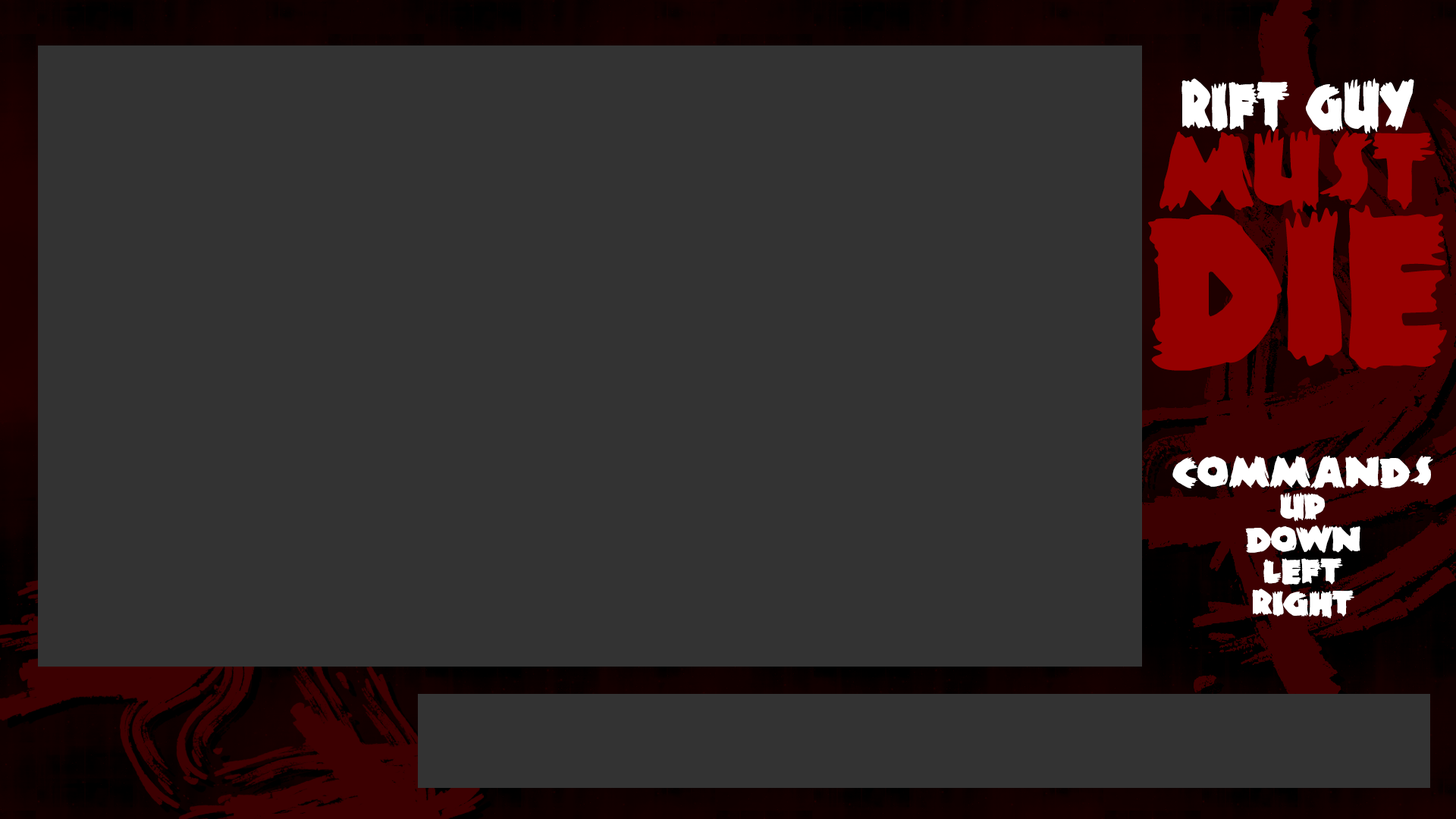
<style>
.page{position:relative;width:1456px;height:819px;background:#333333}
.page>*{position:absolute;margin:0}
.t1{font:77.4px "ZombieA";color:#ffffff;scale:0.77 1}
.t2{font:120.3px "ZombieA";color:#950000;scale:0.94 1}
.t3{font:252.2px "ZombieA";color:#950000;scale:0.84 1}
.t4{font:40.1px/32.1px "ZombieA";color:#ffffff}
.t5{font:48.2px "ZombieA";color:#ffffff}
</style>
<div class="page">
<p class="t1" style="left:1181px;top:78px;width:233px;height:56px">Rift Guy</p>
<p class="t2" style="left:1159px;top:127px;width:276px;height:87px">MUST</p>
<p class="t3" style="left:1148px;top:205px;width:299px;height:166px">DIE</p>
<p class="t4" style="left:1172px;top:455px;width:261px;height:164px;text-align:center"><span class="t5">Commands<br></span>Up<br>Down<br>Left<br>Right</p>
</div>
